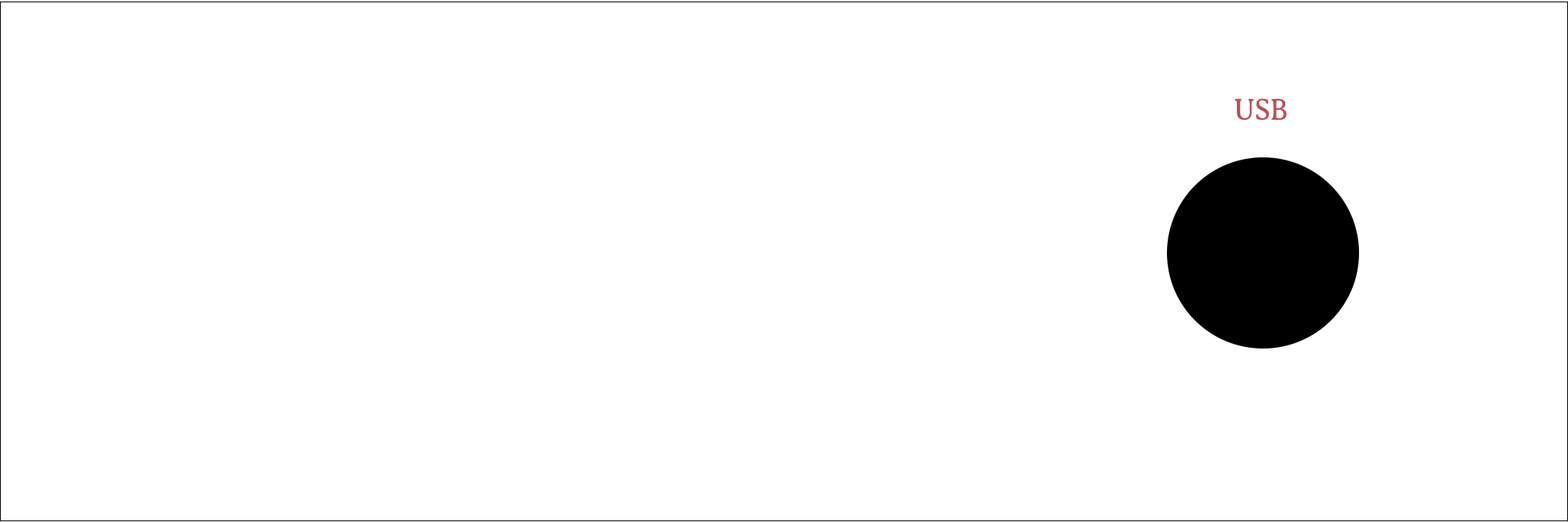
<style>
.page{position:relative;width:1568px;height:522px;background:#ffffff}
.page>*{position:absolute;margin:0}
.t1{font:30.7px "AveriaSerifLibre-Regular";color:#b75259;scale:0.91 1}
</style>
<div class="page">
<p class="t1" style="left:1235px;top:98px;width:52px;height:23px">USB</p>
</div>
